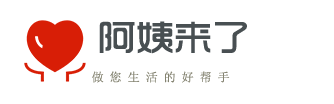
<style>
.page{position:relative;width:334px;height:104px;background:#ffffff}
.page>*{position:absolute;margin:0}
.t1{font:37.3px "TRENDS";color:#484f52}
.t2{font:12px "SimSun";color:#848371}
</style>
<div class="page">
<p class="t1" style="left:99px;top:21px;width:148px;height:33px">阿姨来了</p>
<p class="t2" style="left:92px;top:71px;width:138px;height:12px">做 您 生 活 的 好 帮 手</p>
</div>
